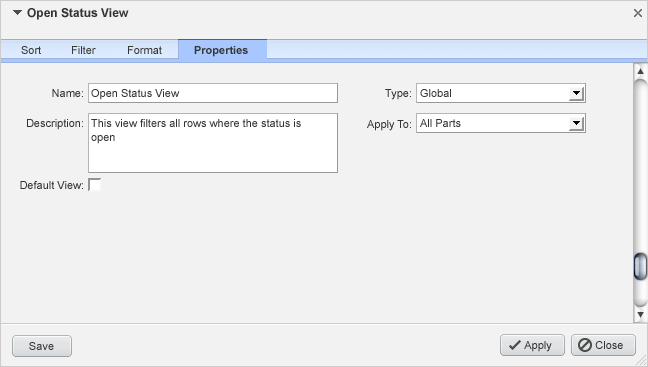
<style>
.page{position:relative;width:648px;height:367px;background:#f2f2f2}
.page>*{position:absolute;margin:0}
.t1{font:12px "Arial-BoldMT";color:#333333}
.t2{font:11px "ArialMT";color:#363636}
.t3{font:11px "Arial-BoldMT";color:#363636}
.t4{font:11px "ArialMT";color:#333333}
.t5{font:11px/14px "ArialMT";color:#333333}
.t6{font:11px "ArialMT";letter-spacing:0.005em;color:#333333}
</style>
<div class="page">
<p class="t1" style="left:27px;top:8px;width:102px;height:12px">Open Status View</p>
<p class="t2" style="left:21px;top:46px;width:20px;height:8px">Sort</p>
<p class="t2" style="left:72px;top:46px;width:24px;height:8px">Filter</p>
<p class="t2" style="left:128px;top:46px;width:34px;height:8px">Format</p>
<p class="t3" style="left:194px;top:46px;width:54px;height:11px">Properties</p>
<p class="t4" style="left:52px;top:89px;width:31px;height:8px">Name:</p>
<p class="t4" style="left:91px;top:89px;width:89px;height:11px">Open Status View</p>
<p class="t4" style="left:385px;top:89px;width:26px;height:11px">Type:</p>
<p class="t4" style="left:420px;top:89px;width:31px;height:8px">Global</p>
<p class="t4" style="left:27px;top:119px;width:56px;height:11px">Description:</p>
<p class="t5" style="left:91px;top:119px;width:210px;height:25px">This view filters all rows where the status is<br>open</p>
<p class="t4" style="left:367px;top:120px;width:44px;height:11px">Apply To:</p>
<p class="t4" style="left:420px;top:119px;width:41px;height:8px">All Parts</p>
<p class="t4" style="left:20px;top:181px;width:63px;height:8px">Default View:</p>
<p class="t6" style="left:29px;top:342px;width:25px;height:8px">Save</p>
<p class="t4" style="left:524px;top:341px;width:28px;height:11px">Apply</p>
<p class="t4" style="left:595px;top:341px;width:28px;height:8px">Close</p>
</div>
